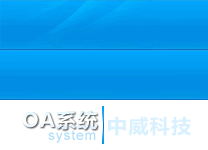
<style>
.page{position:relative;width:208px;height:150px;background:#ffffff}
.page>*{position:absolute;margin:0}
.t1{font:19.5px "MicrosoftYaHei-Bold";letter-spacing:0.055em;color:#d9f1ff;scale:1.04 1}
.t2{font:13.4px "ArialMT";letter-spacing:0.055em;color:#afddf9;scale:1.04 1}
</style>
<div class="page">
<p class="t1" style="left:108px;top:116px;width:83px;height:20px">中威科技</p>
<p class="t2" style="left:48px;top:130px;width:48px;height:13px">system</p>
</div>
